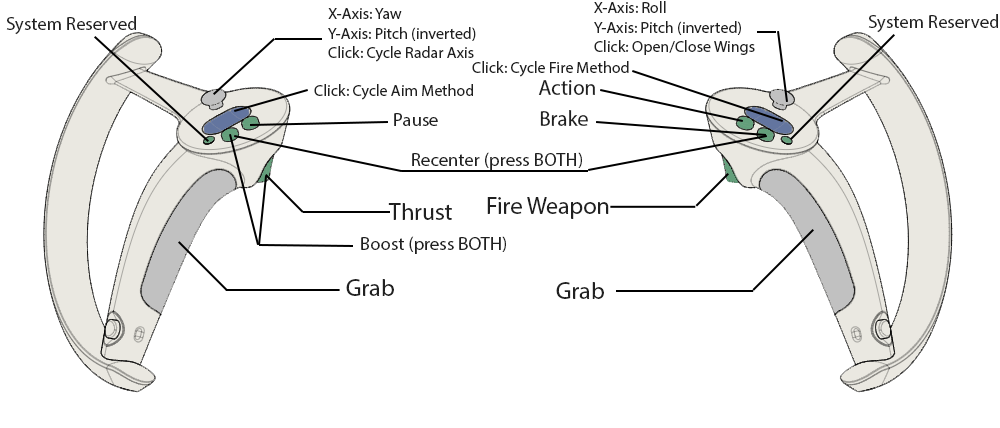
<style>
.page{position:relative;width:1000px;height:428px;background:#ffffff}
.page>*{position:absolute;margin:0}
.t1{font:16px "MyriadPro-Regular";color:#202020}
.t2{font:18.7px "MyriadPro-Regular";color:#202020}
.t3{font:21.3px "MyriadPro-Regular";color:#202020}
.t4{font:24px "MyriadPro-Regular";color:#202020}
</style>
<div class="page">
<p class="t1" style="left:594px;top:1px;width:161px;height:54px">X-Axis: Roll<br>Y-Axis: Pitch (inverted)<br>Click: Open/Close Wings</p>
<p class="t2" style="left:6px;top:16px;width:130px;height:19px">System Reserved</p>
<p class="t1" style="left:328px;top:8px;width:148px;height:54px">X-Axis: Yaw<br>Y-Axis: Pitch (inverted)<br>Click: Cycle Radar Axis</p>
<p class="t2" style="left:868px;top:14px;width:130px;height:19px">System Reserved</p>
<p class="t1" style="left:472px;top:61px;width:157px;height:16px">Click: Cycle Fire Method</p>
<p class="t1" style="left:314px;top:84px;width:159px;height:16px">Click: Cycle Aim Method</p>
<p class="t3" style="left:538px;top:80px;width:57px;height:15px">Action</p>
<p class="t2" style="left:394px;top:113px;width:44px;height:13px">Pause</p>
<p class="t3" style="left:540px;top:110px;width:48px;height:16px">Brake</p>
<p class="t2" style="left:412px;top:152px;width:170px;height:18px">Recenter (press BOTH)</p>
<p class="t4" style="left:487px;top:197px;width:122px;height:22px">Fire Weapon</p>
<p class="t4" style="left:388px;top:203px;width:64px;height:17px">Thrust</p>
<p class="t2" style="left:361px;top:236px;width:145px;height:18px">Boost (press BOTH)</p>
<p class="t4" style="left:346px;top:279px;width:48px;height:17px">Grab</p>
<p class="t4" style="left:556px;top:282px;width:48px;height:17px">Grab</p>
</div>
